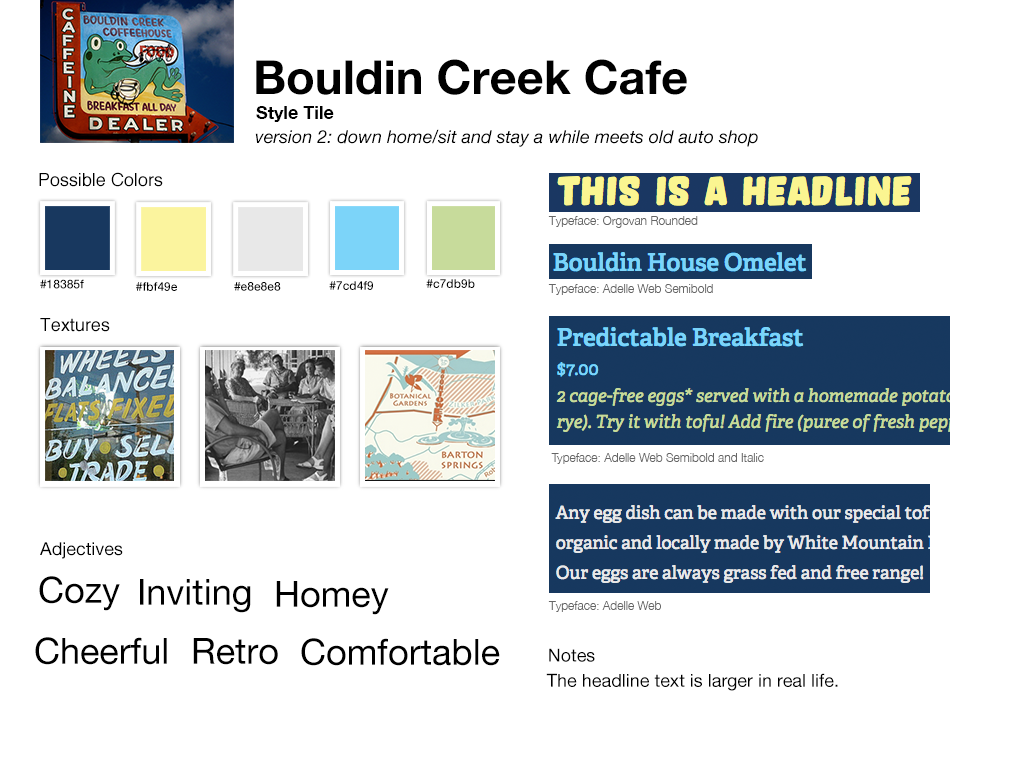
<style>
.page{position:relative;width:1020px;height:760px;background:#ffffff}
.page>*{position:absolute;margin:0}
.t1{font:47px "HelveticaNeue-Bold";color:#000000}
.t2{font:18px "HelveticaNeue-Bold";color:#000000}
.t3{font:18px "HelveticaNeue-Italic";color:#000000}
.t4{font:18px "Helvetica";color:#000000}
.t5{font:12px "HelveticaNeue-Light";color:#666666}
.t6{font:12px "HelveticaNeue-Medium";color:#000000}
.t7{font:18px "HelveticaNeue";color:#000000}
.t8{font:36px "HelveticaNeue";color:#000000}
</style>
<div class="page">
<p class="t1" style="left:256px;top:59px;width:431px;height:36px">Bouldin Creek Cafe</p>
<p class="t2" style="left:256px;top:106px;width:78px;height:16px">Style Tile</p>
<p class="t3" style="left:255px;top:129px;width:503px;height:18px">version 2: down home/sit and stay a while meets old auto shop</p>
<p class="t4" style="left:39px;top:172px;width:124px;height:15px">Possible Colors</p>
<p class="t5" style="left:548px;top:216px;width:150px;height:12px">Typeface: Orgovan Rounded</p>
<p class="t6" style="left:40px;top:279px;width:44px;height:10px">#18385f</p>
<p class="t6" style="left:329px;top:281px;width:44px;height:9px">#7cd4f9</p>
<p class="t6" style="left:426px;top:279px;width:49px;height:9px">#c7db9b</p>
<p class="t6" style="left:136px;top:282px;width:41px;height:9px">#fbf49e</p>
<p class="t6" style="left:234px;top:282px;width:47px;height:9px">#e8e8e8</p>
<p class="t5" style="left:548px;top:284px;width:165px;height:11px">Typeface: Adelle Web Semibold</p>
<p class="t4" style="left:40px;top:318px;width:70px;height:14px">Textures</p>
<p class="t5" style="left:551px;top:453px;width:213px;height:11px">Typeface: Adelle Web Semibold and Italic</p>
<p class="t7" style="left:40px;top:542px;width:83px;height:17px">Adjectives</p>
<p class="t8" style="left:39px;top:576px;width:81px;height:35px">Cozy</p>
<p class="t8" style="left:140px;top:579px;width:111px;height:34px">Inviting</p>
<p class="t8" style="left:276px;top:581px;width:113px;height:34px">Homey</p>
<p class="t5" style="left:548px;top:601px;width:113px;height:11px">Typeface: Adelle Web</p>
<p class="t8" style="left:35px;top:637px;width:132px;height:28px">Cheerful</p>
<p class="t8" style="left:193px;top:638px;width:85px;height:27px">Retro</p>
<p class="t8" style="left:301px;top:638px;width:199px;height:28px">Comfortable</p>
<p class="t7" style="left:549px;top:648px;width:46px;height:14px">Notes</p>
<p class="t7" style="left:546px;top:673px;width:292px;height:18px">The headline text is larger in real life.</p>
</div>
